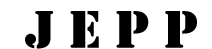
<style>
.page{position:relative;width:212px;height:49px;background:#ffffff}
.page>*{position:absolute;margin:0}
.t1{font:55px "Stencil";color:#000000}
</style>
<div class="page">
<p class="t1" style="left:25px;top:11px;width:172px;height:38px">J E P P</p>
</div>
